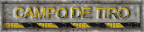
<style>
.page{position:relative;width:144px;height:32px}
.page>*{position:absolute;margin:0}
.t1{font:14px "ArialMT";letter-spacing:-0.02em;text-transform:uppercase;scale:1.06 1}
</style>
<div class="page">
<p class="t1" style="left:14px;top:8px;width:115px;height:10px">campo de tiro</p>
</div>
